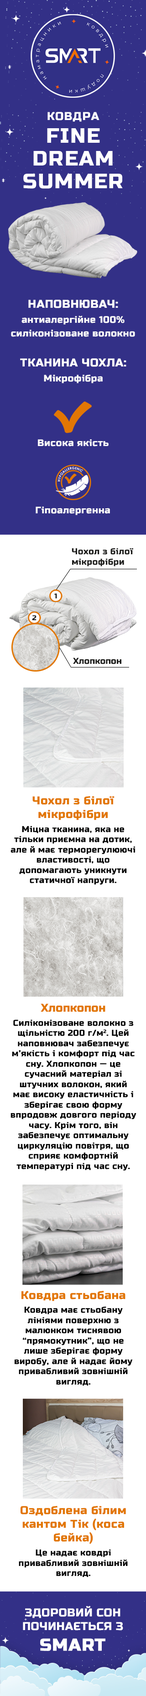
<style>
.page{position:relative;width:146px;height:1696px;background:#ffffff}
.page>*{position:absolute;margin:0}
.t1{font:20.8px/22.7px "RussoOne-Regular";letter-spacing:0.05em;color:#ffffff;text-transform:uppercase}
.t2{font:11.4px/22.7px "RussoOne-Regular";letter-spacing:0.05em;color:#ffffff;text-transform:uppercase}
.t3{font:9.5px "RussoOne-Regular";letter-spacing:0.025em;color:#fffffc}
.t4{font:11.4px "RussoOne-Regular";letter-spacing:0.025em;color:#fffffc;text-transform:uppercase}
.t5{font:8.5px "RussoOne-Regular";letter-spacing:0.025em;color:#1d1d1b}
.t6{font:8.5px "RussoOne-Regular";color:#1d1d1b}
.t7{font:8.5px "RussoOne-Regular";letter-spacing:0.025em;color:#000000}
.t8{font:11.4px "RussoOne-Regular";letter-spacing:0.025em;color:#e27601}
.t9{font:11.4px "RussoOne-Regular";color:#e27601}
.t10{font:11.4px "RussoOne-Regular";letter-spacing:0.025em;color:#ffffff;text-transform:uppercase}
.t11{font:17.1px "RussoOne-Regular";letter-spacing:0.025em;color:#ffffff;text-transform:uppercase;font-weight:bold}
</style>
<div class="page">
<p class="t1" style="left:23px;top:112px;width:99px;height:77px;text-align:center"><span class="t2">Ковдра <br></span>Fine Dream Summer</p>
<p class="t3" style="left:11px;top:300px;width:124px;height:37px;text-align:center"><span class="t4">Наповнювач:<br><br></span>антиалергійне 100%<br><br>силіконізоване волокно</p>
<p class="t4" style="left:20px;top:358px;width:106px;height:25px;text-align:center">Тканина чохла:<br><br><span class="t3">Мікрофібра</span></p>
<p class="t3" style="left:38px;top:439px;width:70px;height:8px">Висока якість</p>
<p class="t3" style="left:35px;top:507px;width:75px;height:8px">Гіпоалергенна</p>
<p class="t5" style="left:71px;top:548px;width:62px;height:19px">Чохол з білої мікрофібри</p>
<p class="t6" style="left:73px;top:658px;width:48px;height:6px">Хлопкопон</p>
<p class="t7" style="left:10px;top:796px;width:125px;height:89px;text-align:center"><span class="t8">Чохол з білої мікрофібри <br><br></span>Міцна тканина, яка не тільки приємна на дотик, але й має терморегулюючі властивості, що допомагають уникнути статичної напруги.</p>
<p class="t7" style="left:10px;top:1004px;width:126px;height:167px;text-align:center"><span class="t9">Хлопкопон            <br><br></span>Силіконізоване волокно з щільністю 200 г/м2. Цей наповнювач забезпечує м’якість і комфорт під час сну. Хлопкопон — це сучасний матеріал зі штучних волокон, який має високу еластичність і  зберігає свою форму впродовж довгого періоду часу. Крім того, він забезпечує оптимальну циркуляцію повітря, що сприяє комфортній температурі під час сну.</p>
<p class="t7" style="left:15px;top:1291px;width:117px;height:95px;text-align:center"><span class="t8">Ковдра стьобана             <br><br></span>Ковдра має стьобану лініями поверхню з малюнком тиснявою “прямокутник”, що не лише зберігає форму виробу, але й надає йому привабливий зовнішній вигляд.</p>
<p class="t7" style="left:19px;top:1506px;width:108px;height:71px;text-align:center"><span class="t8">Оздоблена білим кантом Тік (коса бейка)           <br><br></span>Це надає ковдрі привабливий зовнішній вигляд.</p>
<p class="t10" style="left:23px;top:1606px;width:100px;height:45px;text-align:center">Здоровий сон починається з <br><span class="t11">Smart</span></p>
</div>
